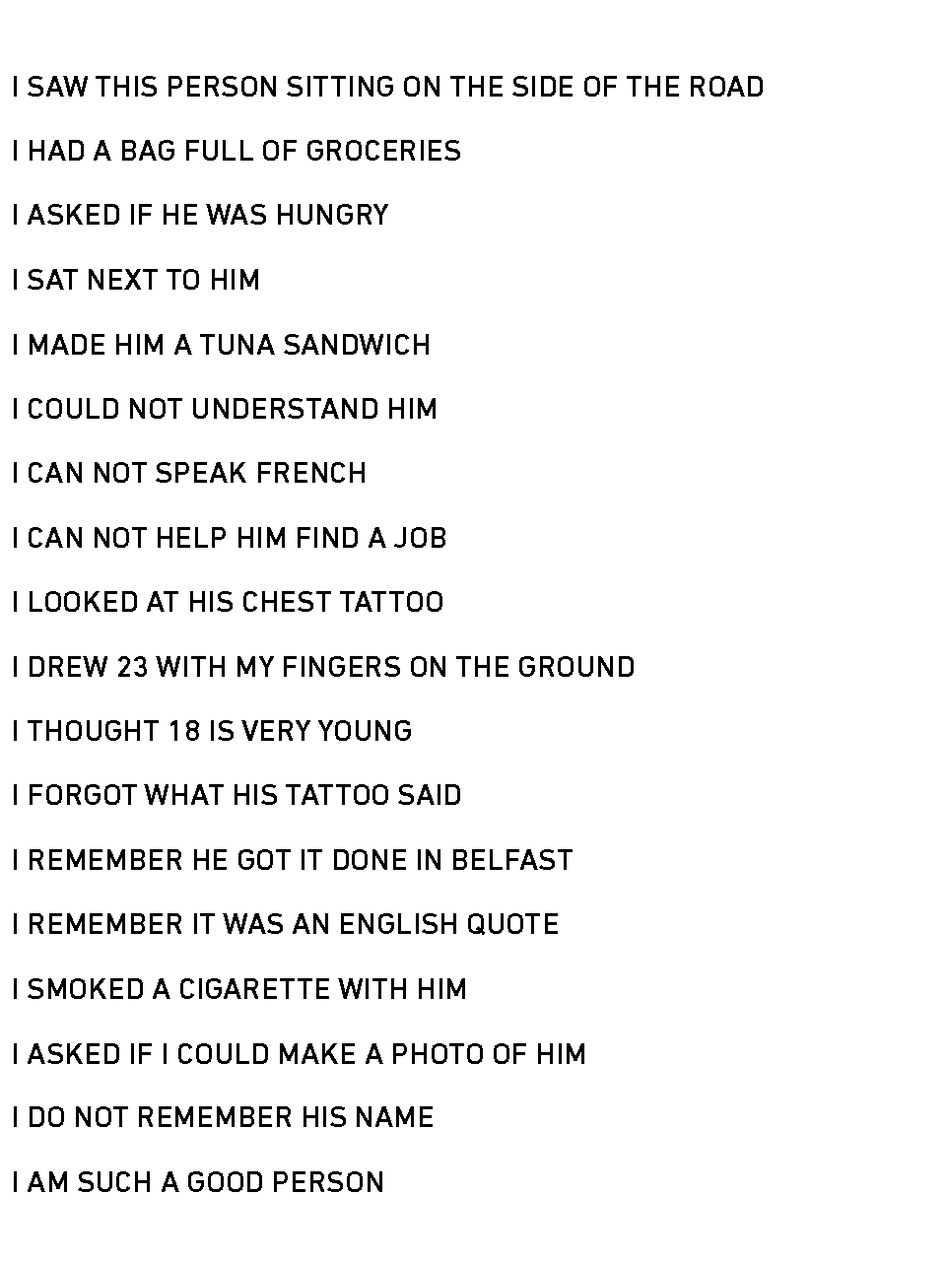
<style>
.page{position:relative;width:946px;height:1261px;background:#ffffff}
.page>*{position:absolute;margin:0}
.t1{font:30.5px "DINNextLTPro-Medium";color:#000000;text-transform:uppercase}
</style>
<div class="page">
<p class="t1" style="left:14px;top:76px;width:748px;height:21px">I saw this Person sitting on the Side of the road</p>
<p class="t1" style="left:14px;top:140px;width:446px;height:21px">I had a bag full of groceries</p>
<p class="t1" style="left:14px;top:204px;width:374px;height:21px">I asked if he was hungry</p>
<p class="t1" style="left:14px;top:269px;width:244px;height:21px">I sat next to him</p>
<p class="t1" style="left:14px;top:334px;width:415px;height:21px">I made him a tuna sandwich</p>
<p class="t1" style="left:14px;top:398px;width:421px;height:21px">I could not understand him</p>
<p class="t1" style="left:14px;top:462px;width:350px;height:21px">I can not speak french</p>
<p class="t1" style="left:14px;top:527px;width:431px;height:21px">I can not help him find a Job</p>
<p class="t1" style="left:14px;top:591px;width:428px;height:21px">I looked at his chest tattoo</p>
<p class="t1" style="left:14px;top:656px;width:619px;height:21px">I drew 23 with my fingers on the ground</p>
<p class="t1" style="left:14px;top:720px;width:397px;height:21px">I thought 18 is very young</p>
<p class="t1" style="left:14px;top:784px;width:446px;height:21px">I forgot what his tattoo said</p>
<p class="t1" style="left:14px;top:849px;width:558px;height:21px">I remember he got it done in Belfast</p>
<p class="t1" style="left:14px;top:913px;width:544px;height:22px">I remember it was an english quote</p>
<p class="t1" style="left:14px;top:978px;width:451px;height:21px">I smoked a cigarette with him</p>
<p class="t1" style="left:14px;top:1043px;width:570px;height:21px">I asked if I could make a photo of him</p>
<p class="t1" style="left:14px;top:1106px;width:418px;height:21px">I do not remember his name</p>
<p class="t1" style="left:14px;top:1171px;width:368px;height:21px">I am such a good person</p>
</div>
